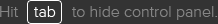
<style>
.page{position:relative;width:218px;height:24px;background:#333333}
.page>*{position:absolute;margin:0}
.t1{font:16px "ProximaNova-Light";color:#858585}
.t2{font:16px "ProximaNova-Light";color:#ffffff}
</style>
<div class="page">
<p class="t1" style="left:0px;top:6px;width:218px;height:14px">Hit             to hide control panel.</p>
<p class="t2" style="left:34px;top:6px;width:22px;height:11px">tab</p>
</div>
